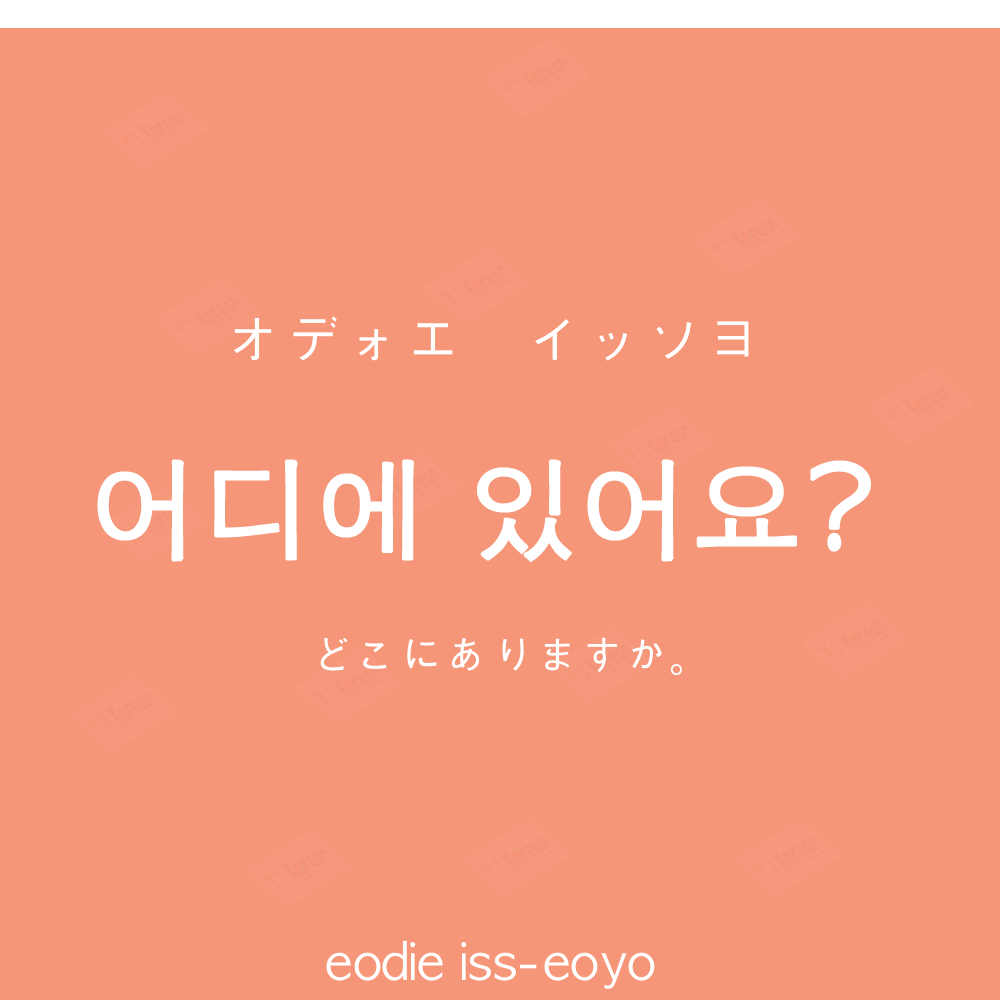
<style>
.page{position:relative;width:1000px;height:1000px;background:#f69679}
.page>*{position:absolute;margin:0}
.t1{font:60px "AppleGothic";color:#ffffff}
.t2{font:110px "AppleGothic";color:#ffffff;font-weight:bold}
.t3{font:45px "AppleGothic";color:#ffffff}
.t4{font:50px "AppleGothic";color:#ffffff}
</style>
<div class="page">
<p class="t1" style="left:234px;top:316px;width:515px;height:45px">オデォエ　イッソヨ</p>
<p class="t2" style="left:97px;top:459px;width:774px;height:103px">어디에 있어요?</p>
<p class="t3" style="left:320px;top:637px;width:362px;height:39px">どこにありますか。</p>
<p class="t4" style="left:326px;top:940px;width:329px;height:49px">eodie iss-eoyo</p>
</div>
